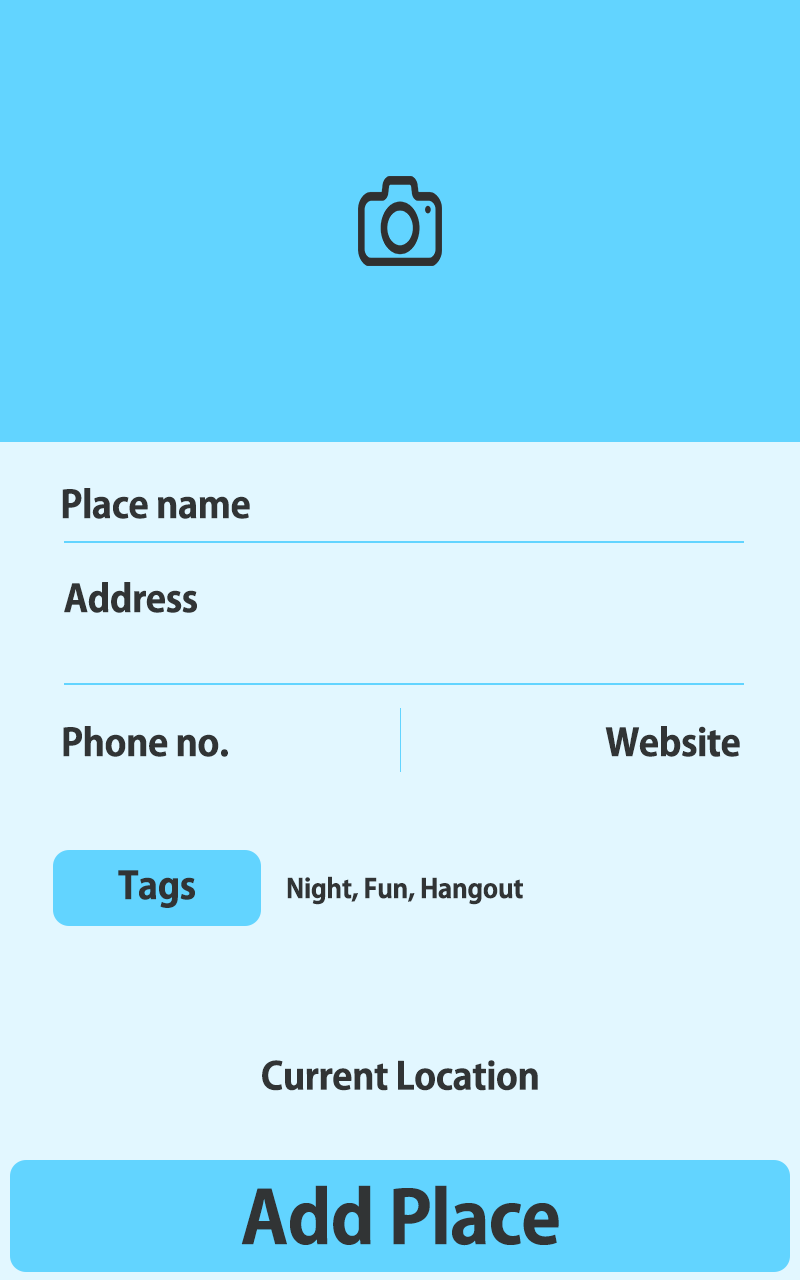
<style>
.page{position:relative;width:800px;height:1280px;background:#e2f7ff}
.page>*{position:absolute;margin:0}
.t1{font:37px "AdobeGothicStd-Bold";letter-spacing:-0.04em;color:#313435;font-weight:bold}
.t2{font:26px "AdobeGothicStd-Bold";letter-spacing:-0.04em;color:#313435;font-weight:bold}
.t3{font:72px "AdobeGothicStd-Bold";letter-spacing:-0.04em;color:#313435;font-weight:bold}
</style>
<div class="page">
<p class="t1" style="left:62px;top:488px;width:188px;height:31px">Place name</p>
<p class="t1" style="left:64px;top:582px;width:133px;height:31px">Address</p>
<p class="t1" style="left:63px;top:726px;width:165px;height:31px">Phone no.</p>
<p class="t1" style="left:605px;top:726px;width:135px;height:31px">Website</p>
<p class="t1" style="left:118px;top:870px;width:77px;height:38px">Tags</p>
<p class="t2" style="left:287px;top:876px;width:236px;height:29px">Night, Fun, Hangout</p>
<p class="t1" style="left:262px;top:1060px;width:276px;height:31px">Current Location</p>
<p class="t3" style="left:241px;top:1185px;width:318px;height:61px">Add Place</p>
</div>
